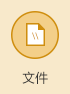
<style>
.page{position:relative;width:70px;height:94px;background:#f8e9cb}
.page>*{position:absolute;margin:0}
.t1{font:8px "MicrosoftYaHei"}
.t2{font:13px "MicrosoftYaHei";color:#323232}
</style>
<div class="page">
<p class="t1" style="left:32px;top:32px;width:7px;height:8px">\\</p>
<p class="t2" style="left:22px;top:71px;width:26px;height:13px">文件</p>
</div>
